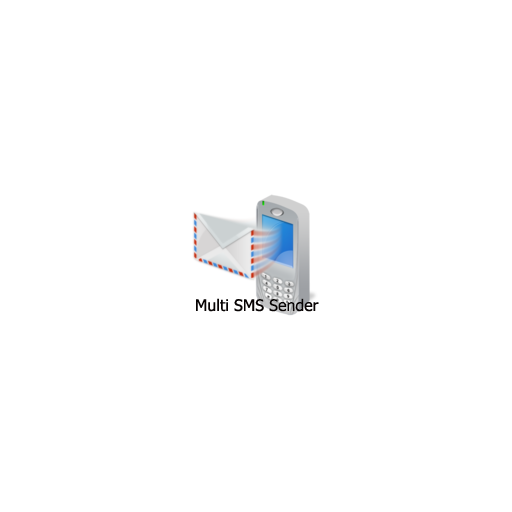
<style>
.page{position:relative;width:512px;height:512px;background:#ffffff}
.page>*{position:absolute;margin:0}
.t1{font:16px "Tahoma";color:#080404}
</style>
<div class="page">
<p class="t1" style="left:196px;top:298px;width:123px;height:14px">Multi SMS Sender</p>
</div>
